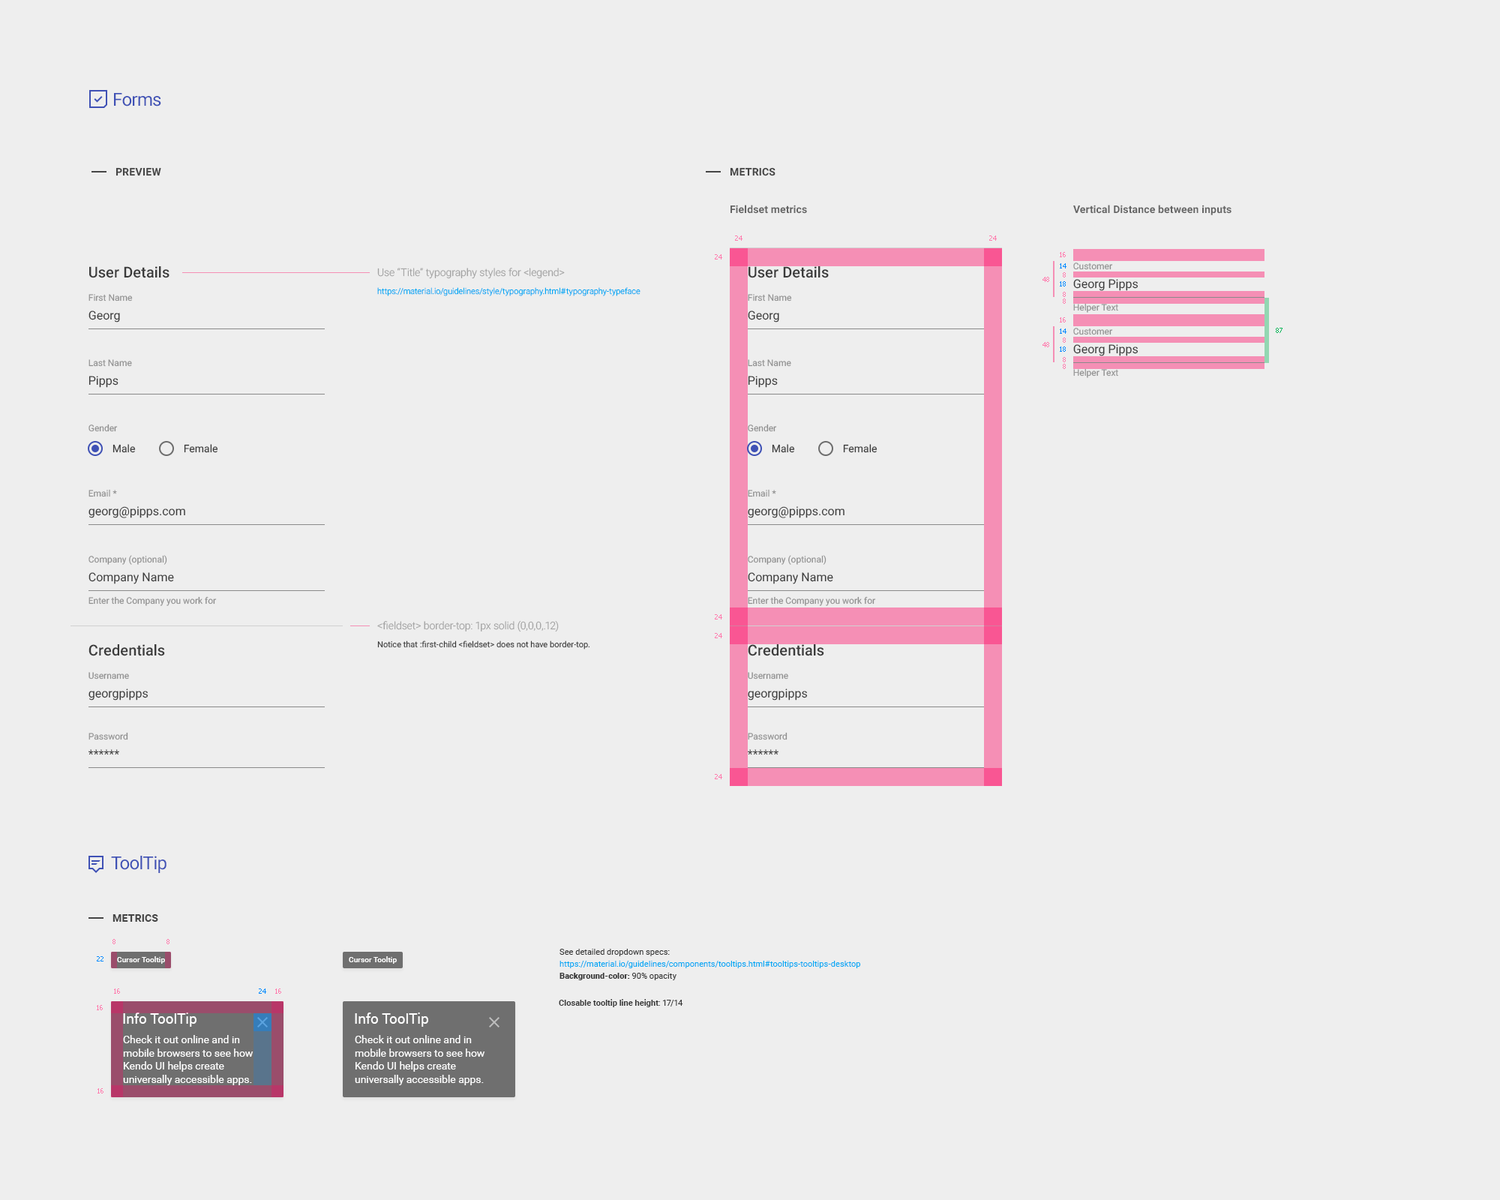
<style>
.page{position:relative;width:1500px;height:1200px;background:#eeeeee}
.page>*{position:absolute;margin:0}
.t1{font:18px "Roboto-Regular";letter-spacing:-0.025em;color:#3f51b5}
.t2{font:10.5px "Roboto-Bold";letter-spacing:0.01em;color:#454545;text-transform:uppercase}
.t3{font:10.5px "Roboto-Bold";letter-spacing:0.01em;color:#656565}
.t4{font:6.8px "Tahoma";color:#ff7cae}
.t5{font:15px "Roboto-Medium";letter-spacing:0.005em;color:#3b3b3b}
.t6{font:8.2px/18px "Roboto-Light";color:#03a9f4}
.t7{font:10.5px "Roboto-Light";color:#a1a1a1}
.t8{font:6.8px "Tahoma";color:#008aff}
.t9{font:9px "Roboto-Regular";color:#8f8f8f}
.t10{font:12px "Roboto-Regular";color:#3b3b3b}
.t11{font:6.8px "Tahoma";color:#0bb557}
.t12{font:10.5px "Roboto-Regular";color:#3b3b3b}
.t13{font:8.2px/18px "Roboto-Regular";color:#383838}
.t14{font:8.2px/12px "Roboto-Regular";color:#03a9f4}
.t15{font:8.2px/12px "Roboto-Regular";color:#383838}
.t16{font:8.2px/12px "Roboto-Black";color:#383838}
.t17{font:7.5px "Roboto-Medium";color:#ffffff}
.t18{font:8.2px "Roboto-Bold";color:#383838}
.t19{font:8.2px "Roboto-Regular";color:#383838}
.t20{font:14.2px "Roboto-Regular";color:#ffffff}
.t21{font:10.5px/13.1px "Roboto-Regular";color:#ffffff}
</style>
<div class="page">
<p class="t1" style="left:114px;top:93px;width:47px;height:13px">Forms</p>
<p class="t2" style="left:116px;top:167px;width:45px;height:9px">Preview</p>
<p class="t2" style="left:730px;top:167px;width:46px;height:9px">Metrics</p>
<p class="t3" style="left:730px;top:205px;width:77px;height:9px">Fieldset metrics</p>
<p class="t3" style="left:1073px;top:205px;width:159px;height:10px">Vertical Distance between inputs</p>
<p class="t4" style="left:735px;top:236px;width:7px;height:5px">24</p>
<p class="t4" style="left:989px;top:236px;width:8px;height:5px">24</p>
<p class="t4" style="left:715px;top:254px;width:7px;height:6px">24</p>
<p class="t4" style="left:1060px;top:252px;width:6px;height:5px">16</p>
<p class="t5" style="left:89px;top:266px;width:81px;height:12px">User Details</p>
<p class="t6" style="left:377px;top:268px;width:263px;height:28px"><span class="t7">Use “Title” typography styles for &lt;legend&gt;<br></span>https://material.io/guidelines/style/typography.html#typography-typeface</p>
<p class="t5" style="left:748px;top:266px;width:81px;height:12px">User Details</p>
<p class="t8" style="left:1060px;top:263px;width:6px;height:5px">14</p>
<p class="t9" style="left:1073px;top:262px;width:40px;height:8px">Customer</p>
<p class="t4" style="left:1042px;top:277px;width:7px;height:5px">48</p>
<p class="t8" style="left:1060px;top:281px;width:6px;height:5px">18</p>
<p class="t4" style="left:1063px;top:272px;width:3px;height:6px">8</p>
<p class="t10" style="left:1073px;top:279px;width:65px;height:12px">Georg Pipps</p>
<p class="t9" style="left:88px;top:294px;width:45px;height:8px">First Name</p>
<p class="t9" style="left:748px;top:294px;width:44px;height:8px">First Name</p>
<p class="t4" style="left:1063px;top:292px;width:3px;height:5px">8</p>
<p class="t4" style="left:1063px;top:298px;width:3px;height:6px">8</p>
<p class="t9" style="left:1073px;top:303px;width:45px;height:10px">Helper Text</p>
<p class="t10" style="left:88px;top:310px;width:32px;height:12px">Georg</p>
<p class="t10" style="left:748px;top:310px;width:31px;height:12px">Georg</p>
<p class="t4" style="left:1060px;top:317px;width:6px;height:5px">16</p>
<p class="t8" style="left:1060px;top:328px;width:6px;height:6px">14</p>
<p class="t9" style="left:1073px;top:328px;width:40px;height:7px">Customer</p>
<p class="t11" style="left:1276px;top:328px;width:6px;height:5px">87</p>
<p class="t4" style="left:1042px;top:342px;width:7px;height:5px">48</p>
<p class="t4" style="left:1063px;top:338px;width:3px;height:5px">8</p>
<p class="t8" style="left:1060px;top:346px;width:6px;height:6px">18</p>
<p class="t10" style="left:1073px;top:344px;width:65px;height:12px">Georg Pipps</p>
<p class="t9" style="left:88px;top:359px;width:44px;height:8px">Last Name</p>
<p class="t9" style="left:748px;top:359px;width:43px;height:8px">Last Name</p>
<p class="t4" style="left:1063px;top:357px;width:3px;height:5px">8</p>
<p class="t4" style="left:1063px;top:364px;width:3px;height:5px">8</p>
<p class="t10" style="left:88px;top:376px;width:30px;height:12px">Pipps</p>
<p class="t10" style="left:748px;top:376px;width:30px;height:12px">Pipps</p>
<p class="t9" style="left:1073px;top:368px;width:45px;height:10px">Helper Text</p>
<p class="t9" style="left:88px;top:424px;width:30px;height:8px">Gender</p>
<p class="t9" style="left:748px;top:424px;width:29px;height:8px">Gender</p>
<p class="t12" style="left:112px;top:444px;width:24px;height:9px">Male</p>
<p class="t12" style="left:184px;top:444px;width:34px;height:9px">Female</p>
<p class="t12" style="left:772px;top:444px;width:23px;height:9px">Male</p>
<p class="t12" style="left:843px;top:444px;width:35px;height:9px">Female</p>
<p class="t9" style="left:88px;top:489px;width:29px;height:8px">Email *</p>
<p class="t9" style="left:748px;top:489px;width:28px;height:8px">Email *</p>
<p class="t10" style="left:88px;top:506px;width:97px;height:12px">georg@pipps.com</p>
<p class="t10" style="left:748px;top:506px;width:96px;height:12px">georg@pipps.com</p>
<p class="t9" style="left:88px;top:555px;width:79px;height:10px">Company (optional)</p>
<p class="t9" style="left:748px;top:555px;width:78px;height:10px">Company (optional)</p>
<p class="t10" style="left:88px;top:572px;width:86px;height:12px">Company Name</p>
<p class="t10" style="left:748px;top:572px;width:85px;height:12px">Company Name</p>
<p class="t9" style="left:88px;top:596px;width:129px;height:10px">Enter the Company you work for</p>
<p class="t9" style="left:748px;top:596px;width:128px;height:10px">Enter the Company you work for</p>
<p class="t4" style="left:715px;top:614px;width:7px;height:6px">24</p>
<p class="t13" style="left:377px;top:620px;width:213px;height:30px"><span class="t7">&lt;fieldset&gt; border-top: 1px solid (0,0,0,.12)<br></span>Notice that :first-child &lt;fieldset&gt; does not have border-top.</p>
<p class="t4" style="left:715px;top:633px;width:7px;height:5px">24</p>
<p class="t5" style="left:88px;top:644px;width:77px;height:12px">Credentials</p>
<p class="t5" style="left:748px;top:644px;width:76px;height:12px">Credentials</p>
<p class="t9" style="left:88px;top:672px;width:41px;height:8px">Username</p>
<p class="t9" style="left:748px;top:672px;width:40px;height:8px">Username</p>
<p class="t10" style="left:88px;top:688px;width:60px;height:12px">georgpipps</p>
<p class="t10" style="left:748px;top:688px;width:60px;height:12px">georgpipps</p>
<p class="t9" style="left:88px;top:732px;width:40px;height:8px">Password</p>
<p class="t9" style="left:748px;top:732px;width:40px;height:8px">Password</p>
<p class="t10" style="left:88px;top:749px;width:31px;height:6px">******</p>
<p class="t10" style="left:748px;top:749px;width:30px;height:6px">******</p>
<p class="t4" style="left:715px;top:774px;width:7px;height:5px">24</p>
<p class="t1" style="left:111px;top:856px;width:55px;height:17px">ToolTip</p>
<p class="t2" style="left:112px;top:914px;width:46px;height:8px">Metrics</p>
<p class="t4" style="left:112px;top:939px;width:4px;height:5px">8</p>
<p class="t4" style="left:166px;top:939px;width:4px;height:5px">8</p>
<p class="t14" style="left:560px;top:949px;width:300px;height:31px"><span class="t15">See detailed dropdown specs:<br></span>https://material.io/guidelines/components/tooltips.html#tooltips-tooltips-desktop<br><span class="t16">Background-color: </span><span class="t15">90% opacity</span></p>
<p class="t8" style="left:97px;top:956px;width:7px;height:6px">22</p>
<p class="t17" style="left:117px;top:956px;width:48px;height:8px">Cursor Tooltip</p>
<p class="t17" style="left:349px;top:956px;width:48px;height:8px">Cursor Tooltip</p>
<p class="t4" style="left:114px;top:988px;width:6px;height:6px">16</p>
<p class="t8" style="left:259px;top:988px;width:7px;height:6px">24</p>
<p class="t4" style="left:275px;top:988px;width:6px;height:6px">16</p>
<p class="t18" style="left:559px;top:999px;width:124px;height:8px">Closable tooltip line height<span class="t19">: 17/14</span></p>
<p class="t4" style="left:97px;top:1005px;width:6px;height:5px">16</p>
<p class="t20" style="left:123px;top:1012px;width:73px;height:15px">Info ToolTip</p>
<p class="t20" style="left:355px;top:1012px;width:73px;height:15px">Info ToolTip</p>
<p class="t21" style="left:123px;top:1035px;width:131px;height:50px">Check it out online and in <br>mobile browsers to see how <br>Kendo UI helps create <br>universally accessible apps.</p>
<p class="t21" style="left:355px;top:1035px;width:130px;height:50px">Check it out online and in <br>mobile browsers to see how <br>Kendo UI helps create <br>universally accessible apps.</p>
<p class="t4" style="left:98px;top:1088px;width:6px;height:6px">16</p>
</div>
